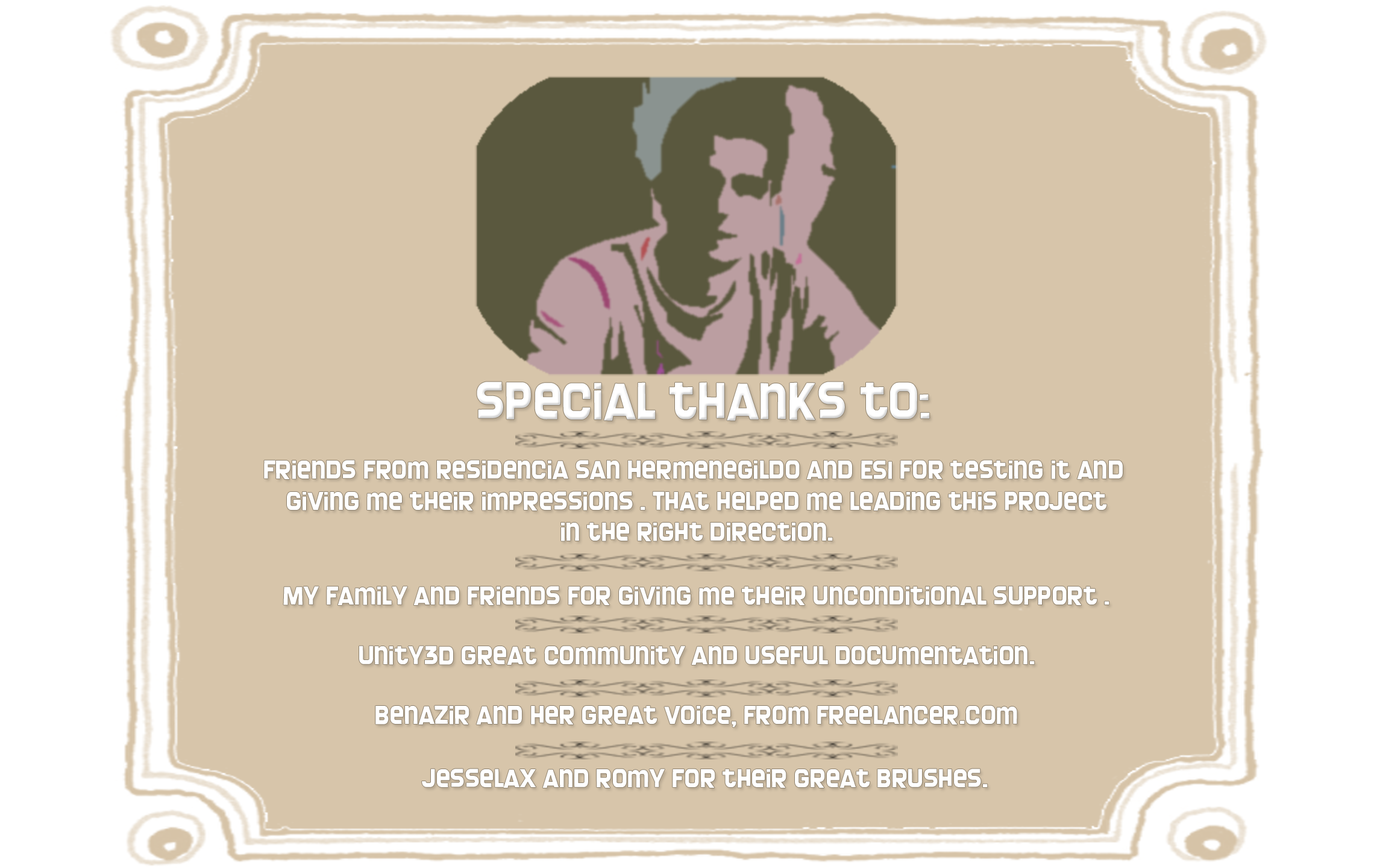
<style>
.page{position:relative;width:1374px;height:868px;background:#d7c5aa}
.page>*{position:absolute;margin:0}
.t1{font:54.2px "Screengem-Regular";color:#ffffff;scale:1.06 1}
.t2{font:27.1px/16.3px "Screengem-Regular";color:#ffffff;scale:1.06 1}
.t3{font:27.1px/65.1px "Screengem-Regular";color:#ffffff;scale:1.06 1}
.t4{font:27.1px/31.2px "Screengem-Regular";color:#ffffff;scale:1.06 1}
.t5{font:27.1px "Screengem-Regular";color:#ffffff;scale:1.06 1}
</style>
<div class="page">
<p class="t1" style="left:477px;top:381px;width:453px;height:40px">special thanks to:</p>
<p class="t2" style="left:264px;top:460px;width:859px;height:81px;text-align:center"><span class="t3">Friends from residencia san hermenegildo and ESI </span>for testing it and <br>giving me their impressions . That help<span class="t4">ed me leading this project<br>in the right direction.</span></p>
<p class="t5" style="left:283px;top:586px;width:826px;height:19px">My family and friends for giving me their unconditional support .</p>
<p class="t5" style="left:359px;top:645px;width:676px;height:20px">unity3D great community and useful documentation.</p>
<p class="t5" style="left:375px;top:705px;width:642px;height:22px">Benazir and her great voice, from freelancer.com</p>
<p class="t5" style="left:422px;top:768px;width:566px;height:20px">JesseLax and romy for their great brushes.</p>
</div>
